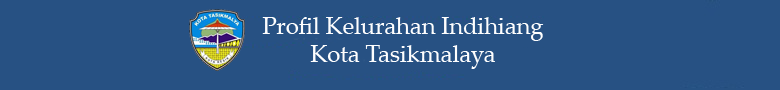
<style>
.page{position:relative;width:780px;height:90px;background:#275183}
.page>*{position:absolute;margin:0}
.t1{font:23.6px "PalatinoLinotype-Roman";color:#fefefe}
</style>
<div class="page">
<p class="t1" style="left:262px;top:17px;width:282px;height:52px;text-align:center">Profil Kelurahan Indihiang<br>Kota Tasikmalaya</p>
</div>
